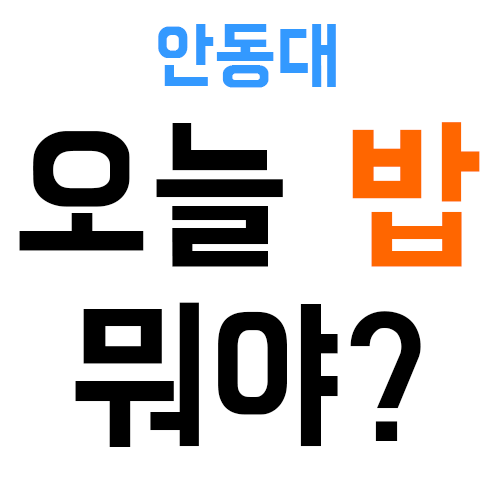
<style>
.page{position:relative;width:496px;height:496px;background:#ffffff}
.page>*{position:absolute;margin:0}
.t1{font:76px "BMHANNA11yrsold";color:#3399ff;scale:0.95 1}
.t2{font:171px/180px "BMHANNA11yrsold";color:#000000;scale:0.95 1}
.t3{font:171px/180px "BMHANNA11yrsold";color:#ff6600;scale:0.95 1}
</style>
<div class="page">
<p class="t1" style="left:158px;top:24px;width:178px;height:64px">안동대</p>
<p class="t2" style="left:19px;top:122px;width:461px;height:325px;text-align:center">오늘 <span class="t3">밥 </span>뭐야?</p>
</div>
